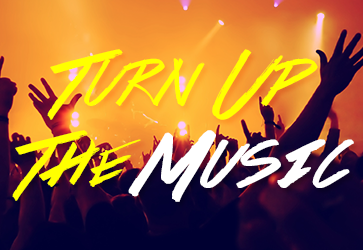
<style>
.page{position:relative;width:363px;height:250px}
.page>*{position:absolute;margin:0}
.t1{font:67.7px "ColorsOfAutumn";color:#ffff00}
.t2{font:67.7px "ColorsOfAutumn";color:#ffffff;font-weight:bold}
</style>
<div class="page">
<p class="t1" style="left:12px;top:49px;width:342px;height:153px;text-align:center">Turn Up<br>The <span class="t2">Music</span></p>
</div>
